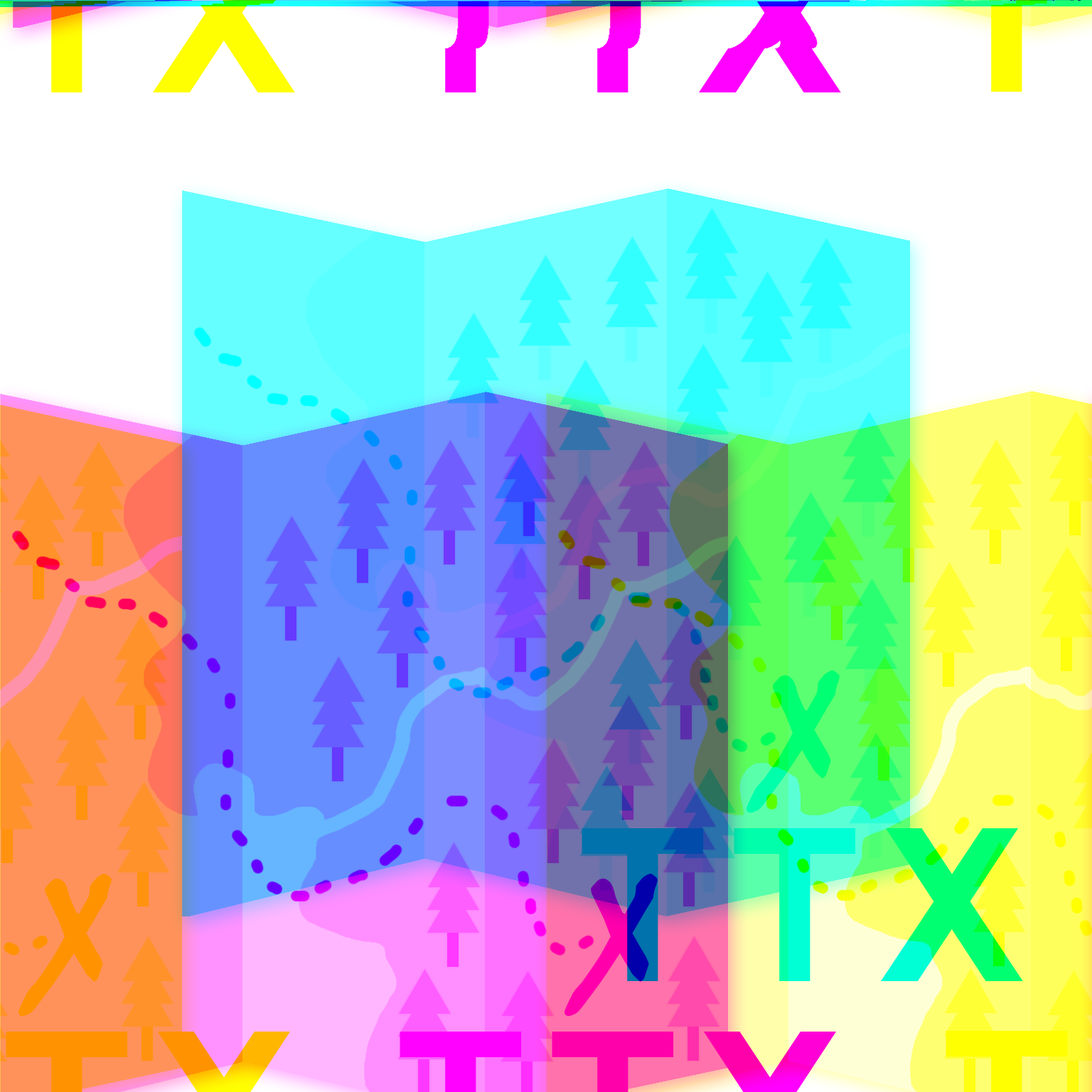
<style>
.page{position:relative;width:1092px;height:1092px}
.page>*{position:absolute;margin:0}
.t1{font:213.3px "Arial-BoldMT";letter-spacing:0.1em}
</style>
<div class="page">
<p class="t1" style="left:582px;top:822px;width:441px;height:153px">TTX</p>
</div>
